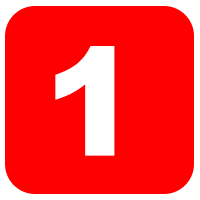
<style>
.page{position:relative;width:200px;height:200px;background:#ff0000}
.page>*{position:absolute;margin:0}
.t1{font:150px "Arial-Black";letter-spacing:0.035em;color:#ffffff;scale:0.95 1}
</style>
<div class="page">
<p class="t1" style="left:55px;top:46px;width:60px;height:110px">1</p>
</div>
